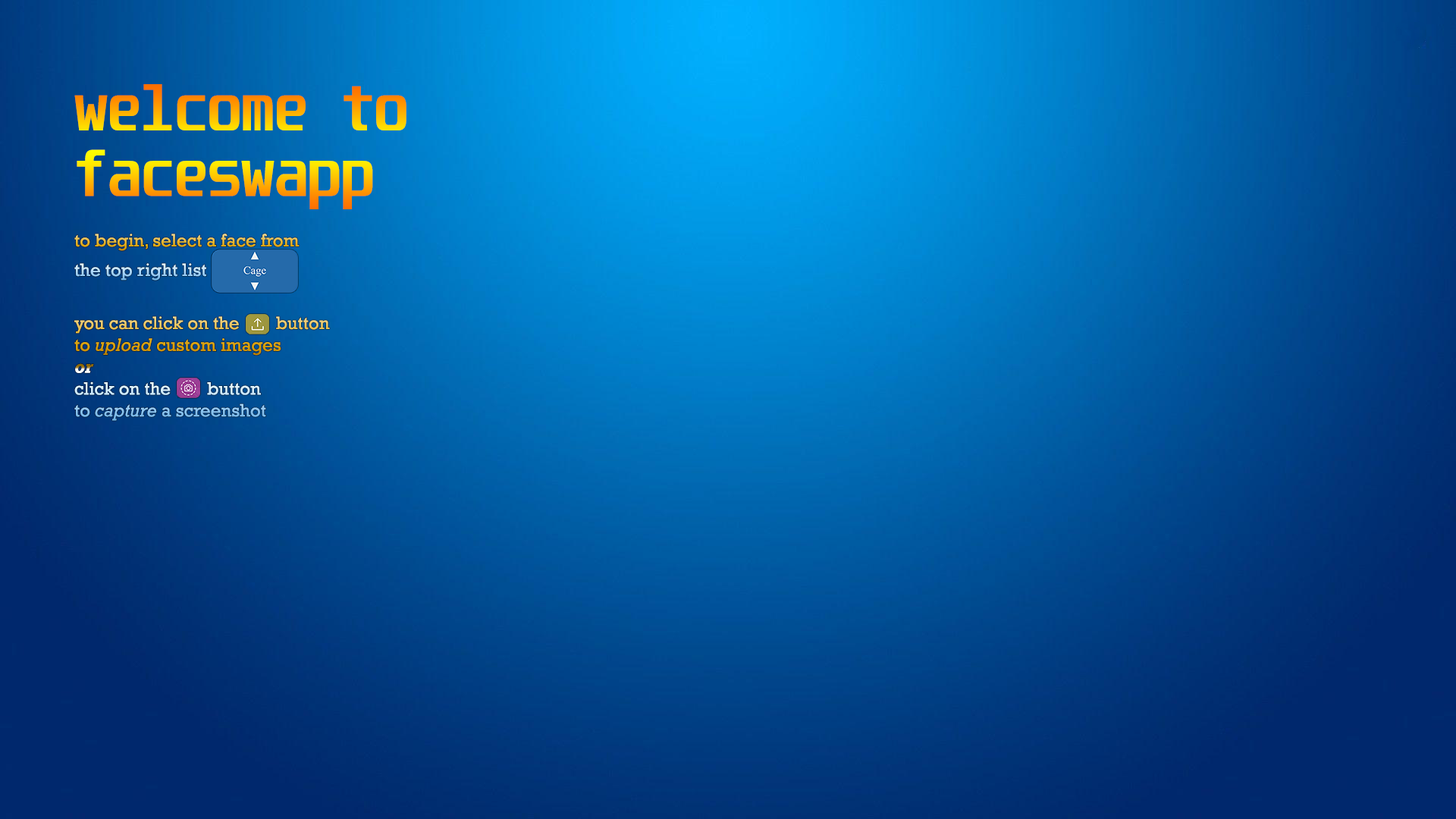
<style>
.page{position:relative;width:1456px;height:819px}
.page>*{position:absolute;margin:0}
.t1{font:54.6px "Unispace-Bold"}
.t2{font:18.2px/29.6px "Rockwell"}
.t3{font:18.2px "Rockwell"}
.t4{font:18.2px "Rockwell-Italic"}
.t5{font:18.2px "Rockwell-BoldItalic"}
</style>
<div class="page">
<p class="t1" style="left:74px;top:84px;width:332px;height:125px">welcome to <br>faceswapp</p>
<p class="t2" style="left:74px;top:234px;width:226px;height:47px">to begin, select a face from <br>the top right list</p>
<p class="t3" style="left:74px;top:316px;width:256px;height:105px">you can click on the        button<br>to <span class="t4">upload </span>custom images<br><span class="t5">or<br></span>click on the        button <br>to<span class="t4"> capture </span>a screenshot</p>
</div>
